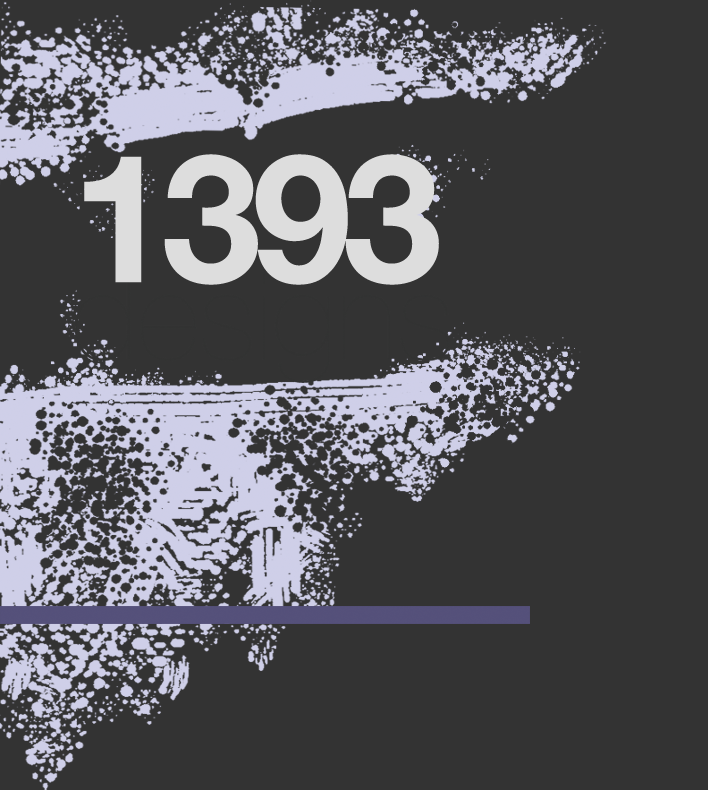
<style>
.page{position:relative;width:708px;height:790px;background:#333333}
.page>*{position:absolute;margin:0}
.t1{font:178.9px "HelveticaNeue-Bold";letter-spacing:-0.05em;color:#dddddd}
</style>
<div class="page">
<p class="t1" style="left:84px;top:154px;width:355px;height:131px">1393</p>
</div>
